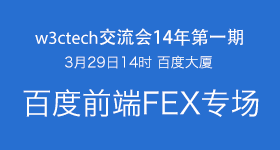
<style>
.page{position:relative;width:280px;height:150px;background:#276fd1}
.page>*{position:absolute;margin:0}
.t1{font:18px "AdobeHeitiStd-Regular";color:#ffffff}
.t2{font:18px "MyriadPro-Regular";color:#ffffff}
.t3{font:14px "HiraginoSansGB-W3";color:#ffffff}
.t4{font:30px "HiraginoSansGB-W3";color:#ffffff}
</style>
<div class="page">
<p class="t1" style="left:35px;top:28px;width:208px;height:18px"><span class="t2">w3ctech</span>交流会14年第一期</p>
<p class="t3" style="left:65px;top:55px;width:148px;height:14px">3月29日14时 百度大厦</p>
<p class="t4" style="left:23px;top:89px;width:236px;height:28px">百度前端FEX专场</p>
</div>
